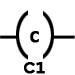
<style>
.page{position:relative;width:75px;height:75px;background:#ffffff}
.page>*{position:absolute;margin:0}
.t1{font:18px "Consolas-Bold";color:#000000;font-weight:bold}
.t2{font:15px "CenturyGothic-Bold";color:#000000;font-weight:bold}
</style>
<div class="page">
<p class="t1" style="left:30px;top:31px;width:9px;height:12px">C</p>
<p class="t2" style="left:24px;top:62px;width:21px;height:12px">C<span class="t1">1</span></p>
</div>
